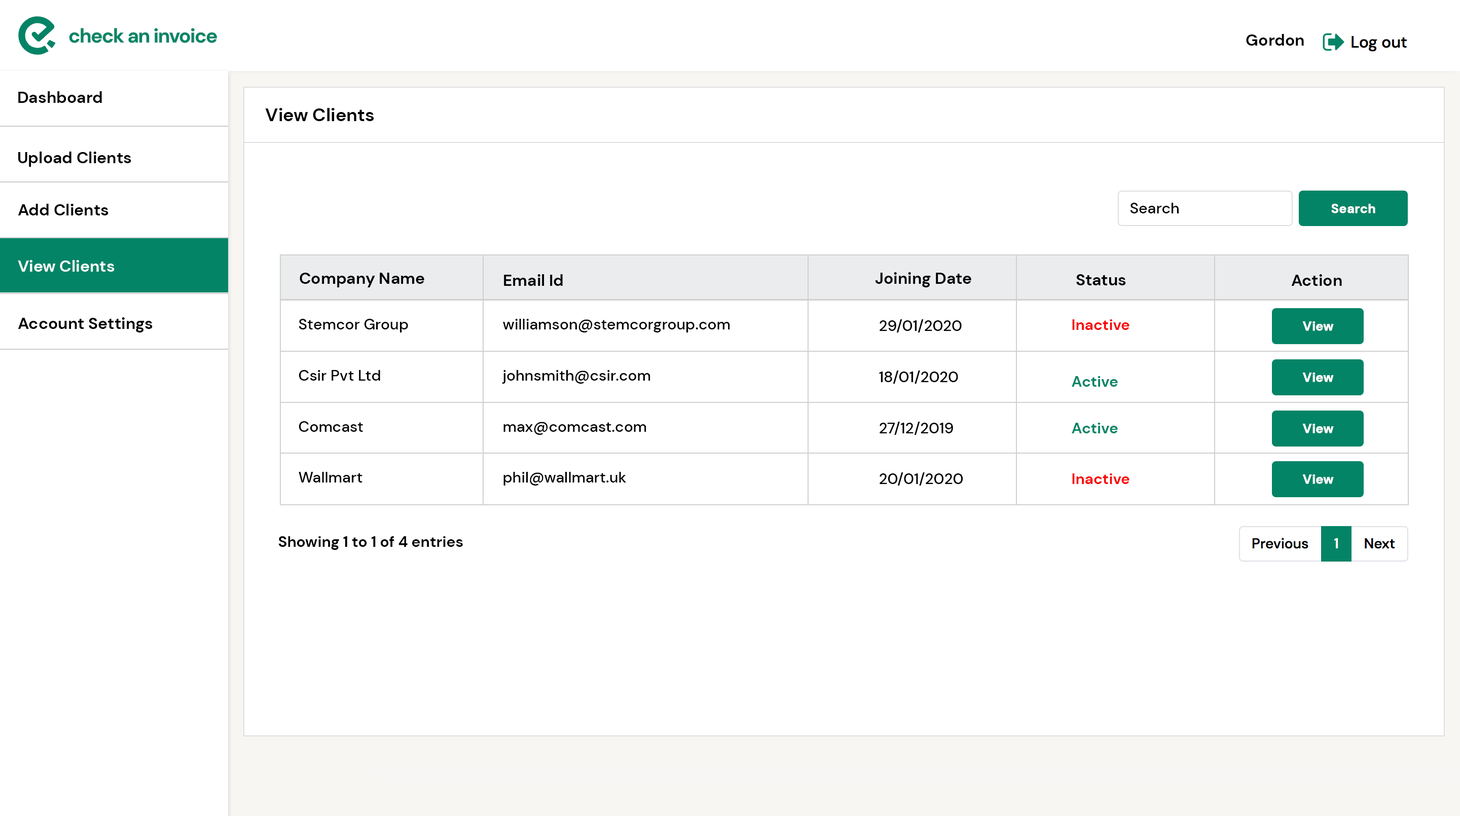
<style>
.page{position:relative;width:1460px;height:816px;background:#ffffff}
.page>*{position:absolute;margin:0}
.t1{font:16.2px "DMSans-Bold";color:#000000}
.t2{font:18.3px "DMSans-Bold";color:#010101}
.t3{font:15.2px "DMSans-Medium";color:#000000}
.t4{font:12.7px "DMSans-Bold";color:#ffffff;font-weight:bold}
.t5{font:16.2px "DMSans-Bold";color:#ffffff}
.t6{font:15.2px "DMSans-Bold";color:#fa0303}
.t7{font:15.2px "DMSans-Bold";color:#038466}
.t8{font:15.2px "DMSans-Bold";color:#000000}
</style>
<div class="page">
<p class="t1" style="left:1246px;top:34px;width:58px;height:12px">Gordon</p>
<p class="t1" style="left:18px;top:91px;width:84px;height:12px">Dashboard</p>
<p class="t2" style="left:265px;top:108px;width:109px;height:13px">View Clients</p>
<p class="t1" style="left:18px;top:152px;width:113px;height:15px">Upload Clients</p>
<p class="t1" style="left:18px;top:204px;width:91px;height:12px">Add Clients</p>
<p class="t3" style="left:1130px;top:203px;width:49px;height:10px">Search</p>
<p class="t4" style="left:1332px;top:204px;width:44px;height:9px">Search</p>
<p class="t5" style="left:18px;top:260px;width:97px;height:12px">View Clients</p>
<p class="t1" style="left:300px;top:273px;width:124px;height:15px">Company Name</p>
<p class="t1" style="left:504px;top:274px;width:59px;height:12px">Email Id</p>
<p class="t1" style="left:875px;top:272px;width:97px;height:16px">Joining Date</p>
<p class="t1" style="left:1077px;top:274px;width:49px;height:12px">Status</p>
<p class="t1" style="left:1292px;top:274px;width:50px;height:12px">Action</p>
<p class="t1" style="left:18px;top:317px;width:135px;height:16px">Account Settings</p>
<p class="t3" style="left:299px;top:319px;width:109px;height:14px">Stemcor Group</p>
<p class="t3" style="left:503px;top:319px;width:227px;height:14px">williamson@stemcorgroup.com</p>
<p class="t3" style="left:880px;top:319px;width:82px;height:14px">29/01/2020</p>
<p class="t6" style="left:1073px;top:319px;width:57px;height:11px">Inactive</p>
<p class="t4" style="left:1303px;top:322px;width:31px;height:9px">View</p>
<p class="t3" style="left:299px;top:370px;width:81px;height:11px">Csir Pvt Ltd</p>
<p class="t3" style="left:502px;top:370px;width:149px;height:14px">johnsmith@csir.com</p>
<p class="t3" style="left:879px;top:371px;width:79px;height:13px">18/01/2020</p>
<p class="t7" style="left:1072px;top:376px;width:46px;height:11px">Active</p>
<p class="t4" style="left:1303px;top:373px;width:31px;height:9px">View</p>
<p class="t3" style="left:299px;top:421px;width:64px;height:11px">Comcast</p>
<p class="t3" style="left:504px;top:422px;width:143px;height:13px">max@comcast.com</p>
<p class="t3" style="left:880px;top:422px;width:73px;height:13px">27/12/2019</p>
<p class="t7" style="left:1072px;top:423px;width:46px;height:11px">Active</p>
<p class="t4" style="left:1303px;top:424px;width:31px;height:10px">View</p>
<p class="t3" style="left:299px;top:472px;width:64px;height:11px">Wallmart</p>
<p class="t3" style="left:504px;top:472px;width:123px;height:14px">phil@wallmart.uk</p>
<p class="t3" style="left:880px;top:473px;width:84px;height:13px">20/01/2020</p>
<p class="t6" style="left:1073px;top:474px;width:57px;height:10px">Inactive</p>
<p class="t4" style="left:1303px;top:475px;width:31px;height:9px">View</p>
<p class="t8" style="left:278px;top:537px;width:185px;height:13px">Showing 1 to 1 of 4 entries</p>
</div>
